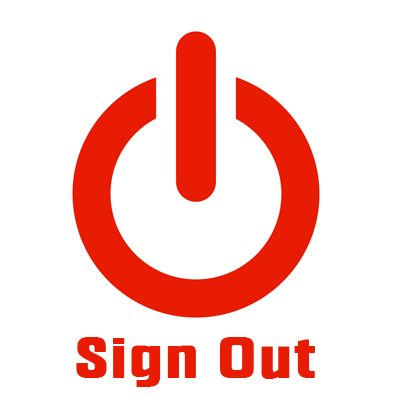
<style>
.page{position:relative;width:395px;height:395px;background:#ffffff}
.page>*{position:absolute;margin:0}
.t1{font:57.1px "Fragua-Bold";color:#e71c02;font-weight:bold;scale:1.17 1}
</style>
<div class="page">
<p class="t1" style="left:76px;top:337px;width:239px;height:50px">Sign Out</p>
</div>
